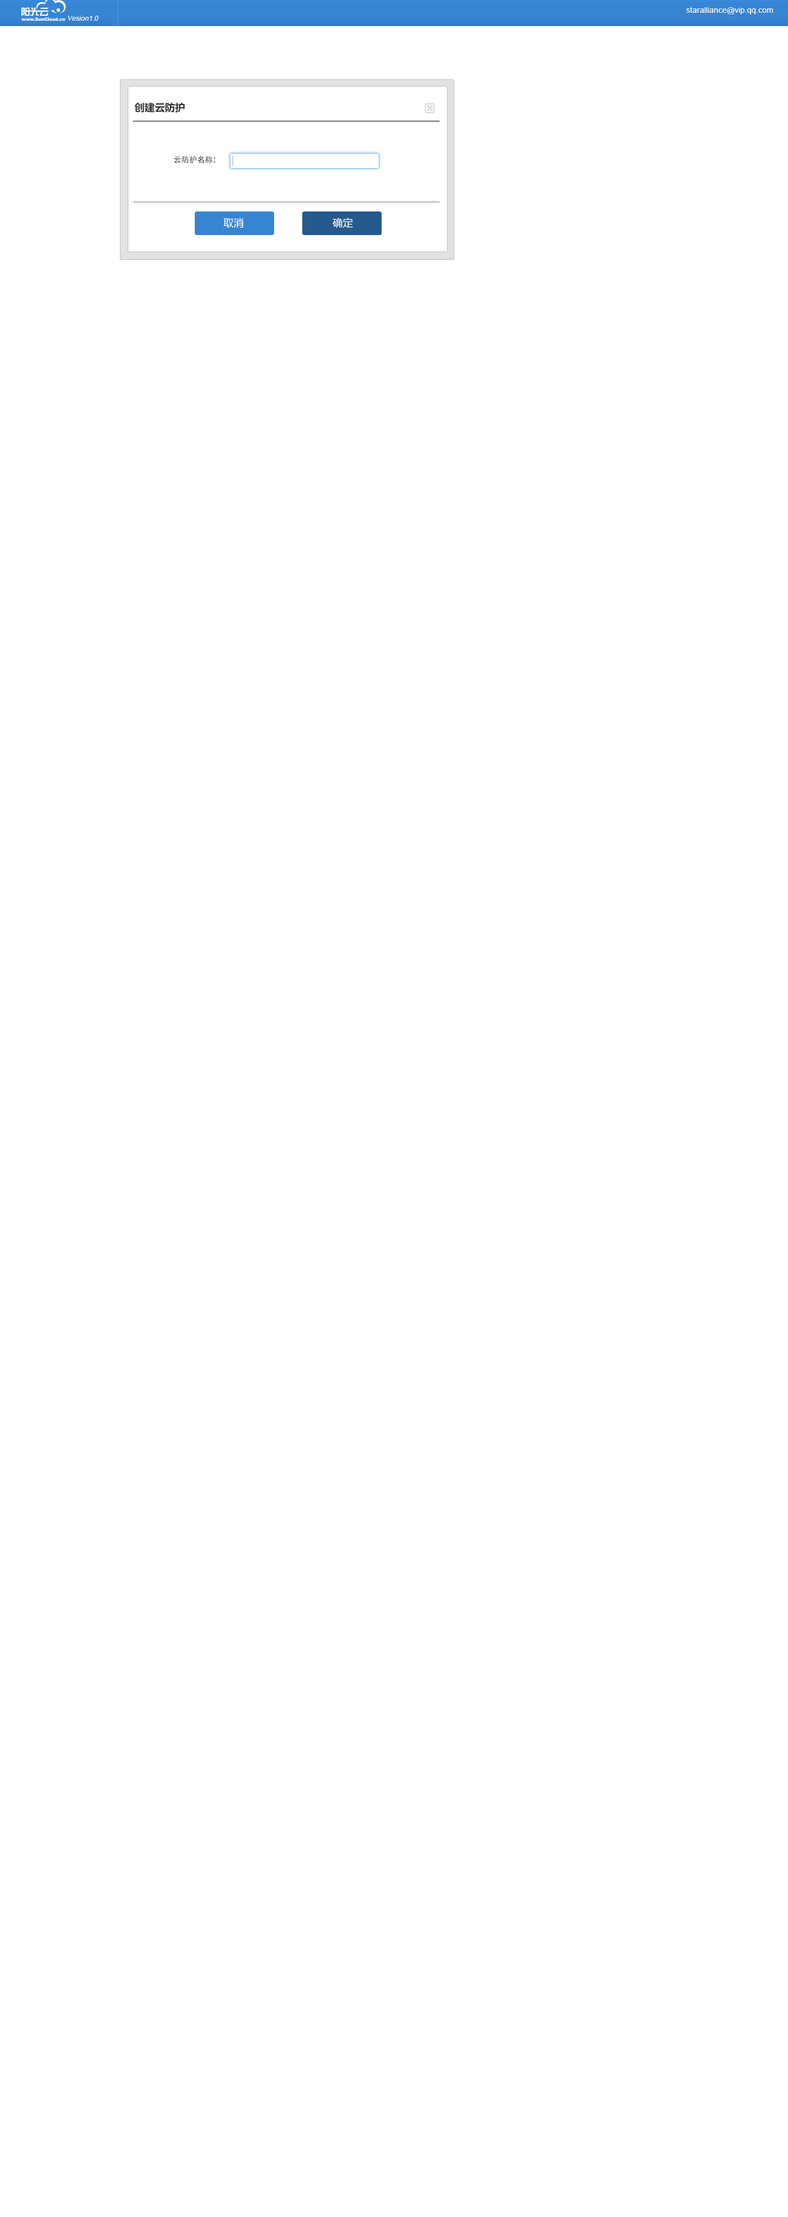
<style>
.page{position:relative;width:788px;height:2217px;background:#ffffff}
.page>*{position:absolute;margin:0}
.t1{font:6.8px "ArialMT";color:#ffffff;font-style:italic}
.t2{font:7.9px "ArialMT";color:#ffffff}
.t3{font:10.1px "MicrosoftYaHei-Bold";color:#333333}
.t4{font:7.9px "AdobeHeitiStd-Regular";color:#333333}
.t5{font:10.1px "MicrosoftYaHei";color:#ffffff}
</style>
<div class="page">
<p class="t1" style="left:68px;top:16px;width:30px;height:5px">Vesion1.0</p>
<p class="t2" style="left:686px;top:7px;width:87px;height:8px">staralliance@vip.qq.com</p>
<p class="t3" style="left:134px;top:102px;width:50px;height:10px">创建云防护</p>
<p class="t4" style="left:174px;top:156px;width:41px;height:8px">云防护名称：</p>
<p class="t5" style="left:223px;top:218px;width:21px;height:10px">取消</p>
<p class="t5" style="left:332px;top:218px;width:21px;height:10px">确定</p>
</div>
